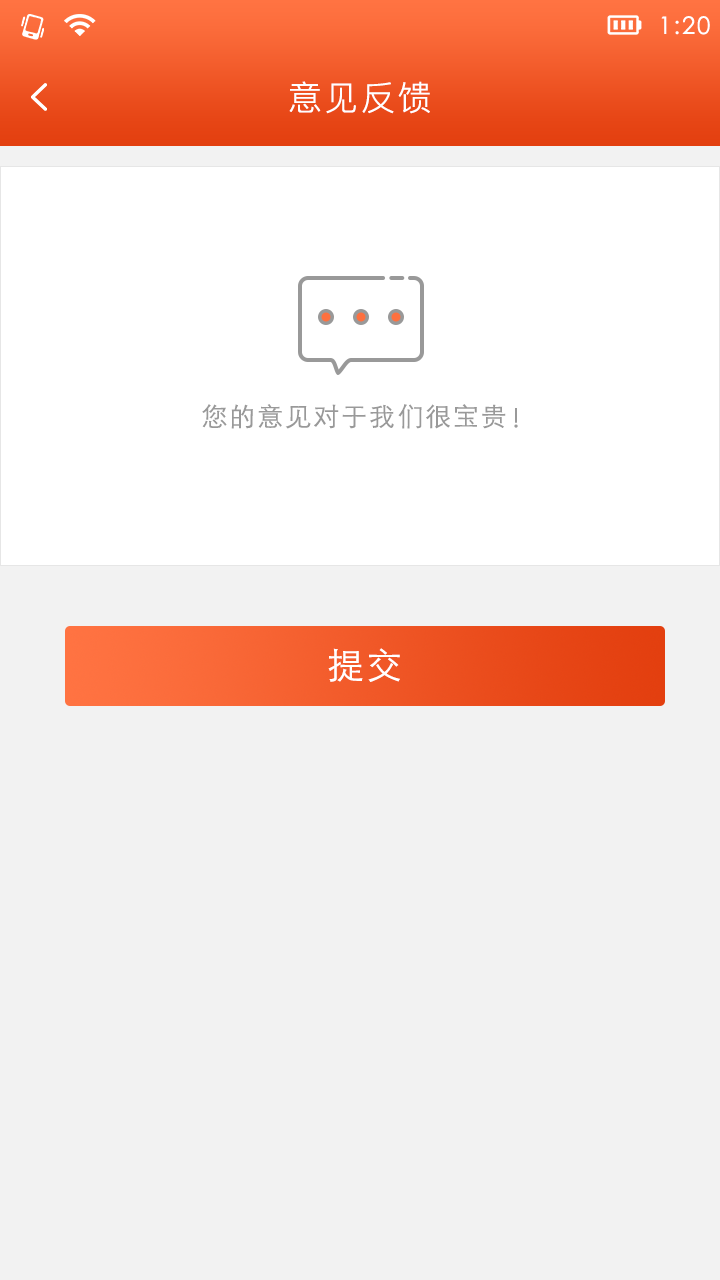
<style>
.page{position:relative;width:720px;height:1280px;background:#f2f2f2}
.page>*{position:absolute;margin:0}
.t1{font:24px "STXihei";letter-spacing:0.075em;color:#ffffff}
.t2{font:34px "PingFangSC-Light";letter-spacing:0.075em;color:#ffffff}
.t3{font:26px "STHeitiSC-Light";letter-spacing:0.075em;color:#999999}
.t4{font:36px "STHeitiSC-Light";letter-spacing:0.075em;color:#ffffff}
</style>
<div class="page">
<p class="t1" style="left:661px;top:16px;width:49px;height:19px">1:20</p>
<p class="t2" style="left:289px;top:81px;width:141px;height:33px">意见反馈</p>
<p class="t3" style="left:202px;top:404px;width:304px;height:25px">您的意见对于我们很宝贵</p>
<p class="t3" style="left:514px;top:408px;width:4px;height:20px">!</p>
<p class="t4" style="left:328px;top:648px;width:72px;height:34px">提交</p>
</div>
